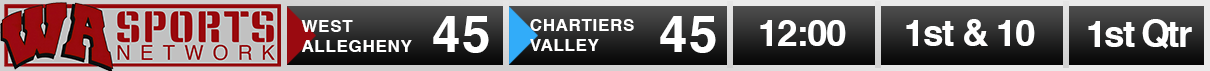
<style>
.page{position:relative;width:1210px;height:71px}
.page>*{position:absolute;margin:0}
.t1{font:51px "Helvetica-Bold";letter-spacing:0.04em;color:#ffffff}
.t2{font:17px "Helvetica-Bold";letter-spacing:0.04em;color:#ffffff}
.t3{font:37px "Helvetica-Bold";letter-spacing:-0.04em;color:#ffffff}
.t4{font:37px "Helvetica-Bold";letter-spacing:-0.06em;color:#ffffff}
</style>
<div class="page">
<p class="t1" style="left:433px;top:16px;width:56px;height:37px">45</p>
<p class="t1" style="left:660px;top:16px;width:56px;height:37px">45</p>
<p class="t2" style="left:301px;top:20px;width:111px;height:32px">WEST<br>ALLEGHENY</p>
<p class="t2" style="left:530px;top:19px;width:104px;height:32px">CHARTIERS<br>VALLEY</p>
<p class="t3" style="left:760px;top:20px;width:86px;height:26px">12:00</p>
<p class="t3" style="left:906px;top:19px;width:129px;height:27px">1st &amp; 10</p>
<p class="t4" style="left:1088px;top:19px;width:104px;height:30px">1st Qtr</p>
</div>
